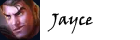
<style>
.page{position:relative;width:140px;height:40px;background:#ffffff}
.page>*{position:absolute;margin:0}
.t1{font:12px "VinerHandITC";color:#000000}
</style>
<div class="page">
<p class="t1" style="left:47px;top:13px;width:46px;height:21px">Jayce</p>
</div>
